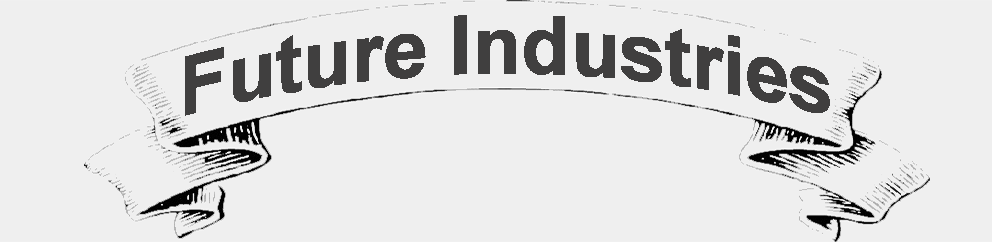
<style>
.page{position:relative;width:992px;height:242px;background:#efefef}
.page>*{position:absolute;margin:0}
.t1{font:80px "Arial-BoldMT";color:#403f3f}
</style>
<div class="page">
<p class="t1" style="left:185px;top:15px;width:645px;height:101px">Future Industries</p>
</div>
